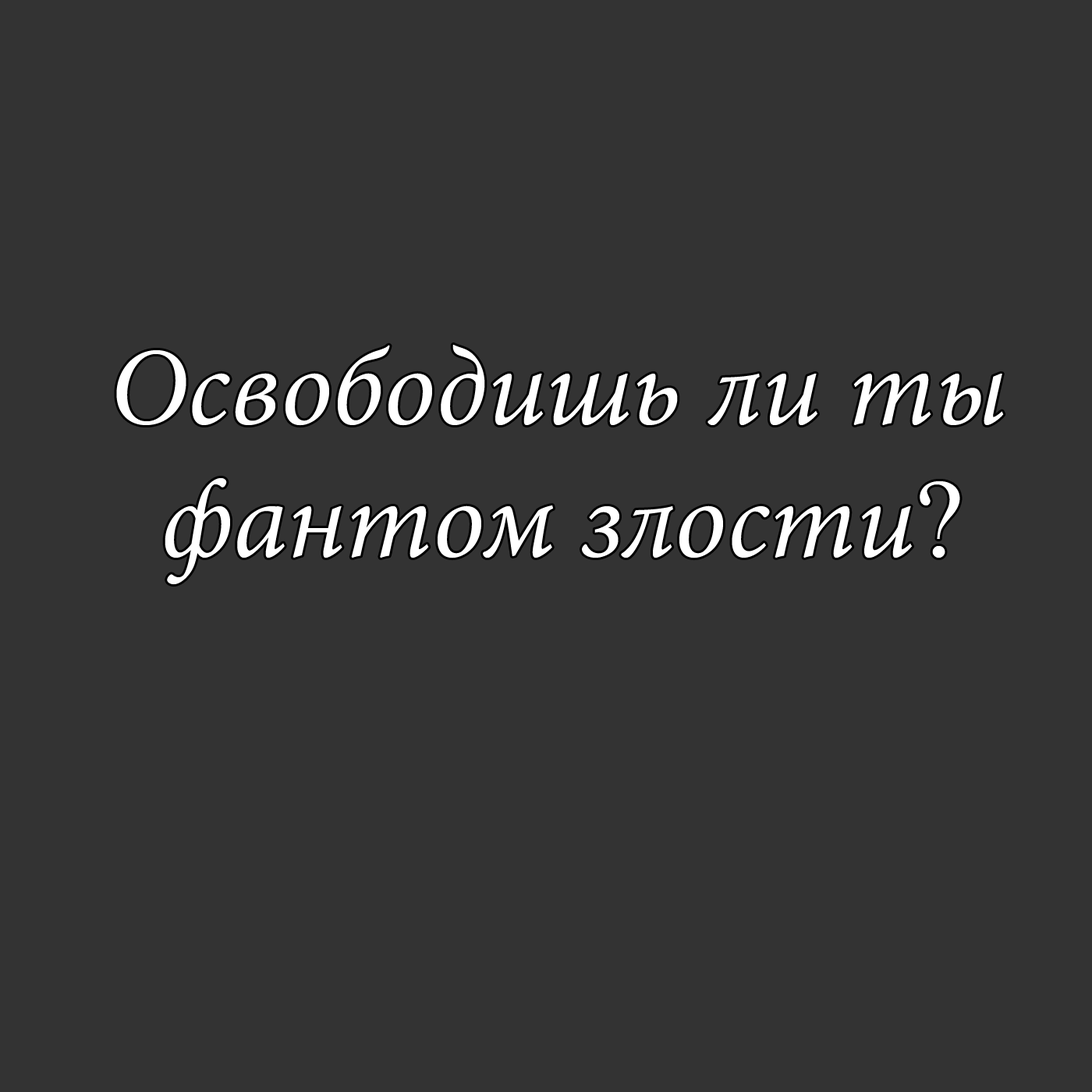
<style>
.page{position:relative;width:1092px;height:1092px;background:#333333}
.page>*{position:absolute;margin:0}
.t1{font:110.5px "MinionPro-It";color:#ffffff}
.t2{font:110.5px "MongolianBaiti";color:#ffffff}
</style>
<div class="page">
<p class="t1" style="left:116px;top:345px;width:888px;height:240px">Освободишь ли ты<br>  фантом злости<span class="t2">?</span></p>
</div>
